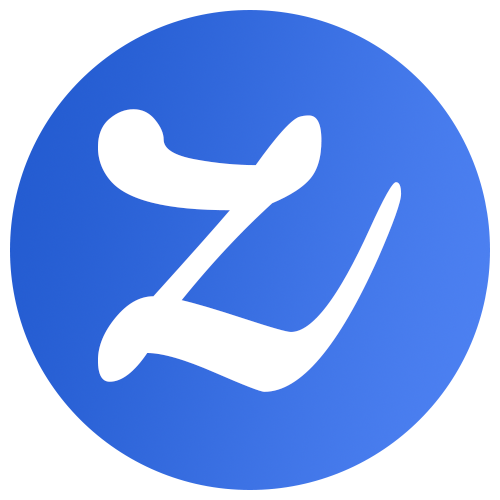
<style>
.page{position:relative;width:500px;height:500px;background:#ffffff}
.page>*{position:absolute;margin:0}
.t1{font:775.6px "Cookie-Regular";color:#ffffff}
</style>
<div class="page">
<p class="t1" style="left:98px;top:109px;width:304px;height:283px">z</p>
</div>
